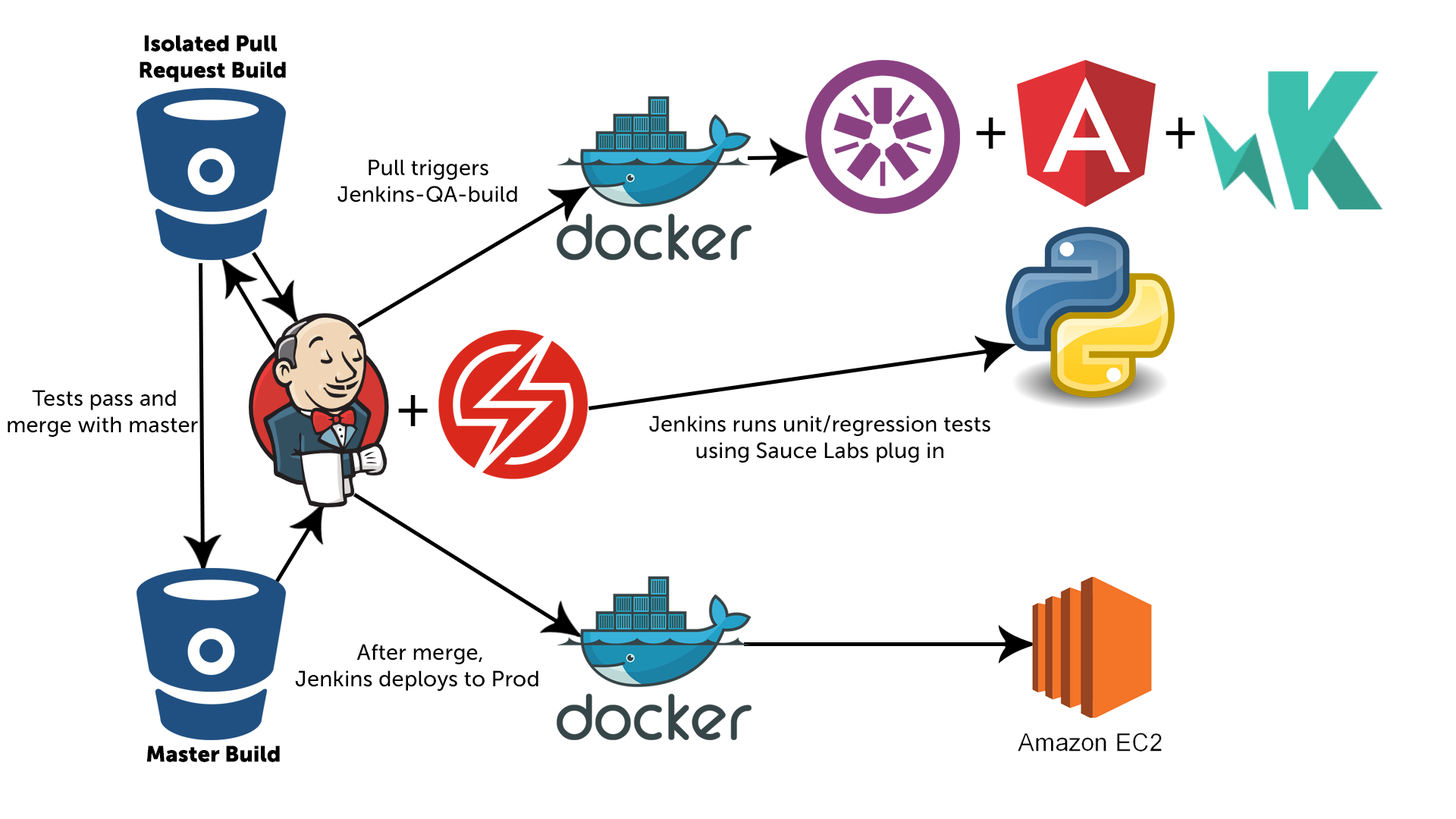
<style>
.page{position:relative;width:1456px;height:819px;background:#ffffff}
.page>*{position:absolute;margin:0}
.t1{font:22.1px "MuseoSans-900";color:#000000}
.t2{font:54.6px "MuseoSans-500";color:#010101}
.t3{font:22.1px "MuseoSans-500";color:#000000}
</style>
<div class="page">
<p class="t1" style="left:140px;top:35px;width:146px;height:48px;text-align:center">Isolated Pull <br>Request Build</p>
<p class="t2" style="left:976px;top:118px;width:30px;height:31px">+</p>
<p class="t2" style="left:1166px;top:118px;width:29px;height:31px">+</p>
<p class="t3" style="left:337px;top:159px;width:180px;height:43px;text-align:center">Pull triggers<br>Jenkins-QA-build</p>
<p class="t3" style="left:8px;top:390px;width:190px;height:47px;text-align:center">Tests pass and<br>merge with master</p>
<p class="t2" style="left:398px;top:395px;width:30px;height:31px">+</p>
<p class="t3" style="left:649px;top:415px;width:341px;height:48px;text-align:center">Jenkins runs unit/regression tests<br>using Sauce Labs plug in</p>
<p class="t3" style="left:295px;top:644px;width:243px;height:47px;text-align:center">After merge,<br>Jenkins deploys to Prod</p>
<p class="t1" style="left:146px;top:745px;width:134px;height:17px">Master Build</p>
</div>
